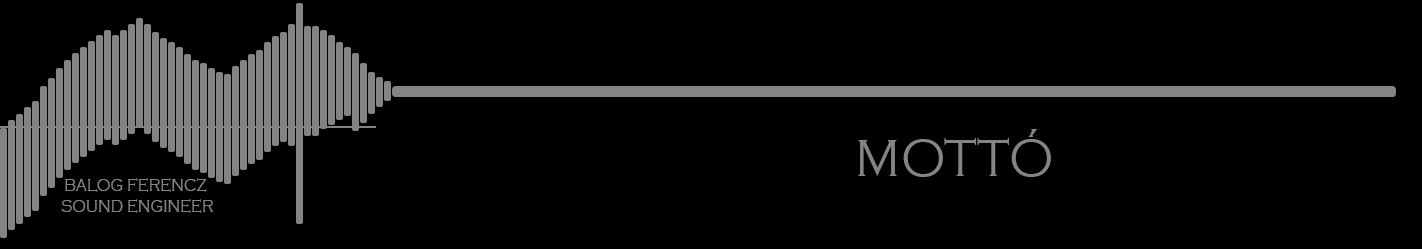
<style>
.page{position:relative;width:1422px;height:249px;background:#000000}
.page>*{position:absolute;margin:0}
.t1{font:54px "CopperplateGothic-Light";color:#848484;scale:0.91 1}
.t2{font:17.6px "CopperplateGothic-Light";color:#848484;scale:0.86 1}
</style>
<div class="page">
<p class="t1" style="left:858px;top:129px;width:193px;height:48px">MOTTÓ</p>
<p class="t2" style="left:61px;top:178px;width:153px;height:35px;text-align:center">BALOG FERENCZ <br>SOUND ENGINEER</p>
</div>
